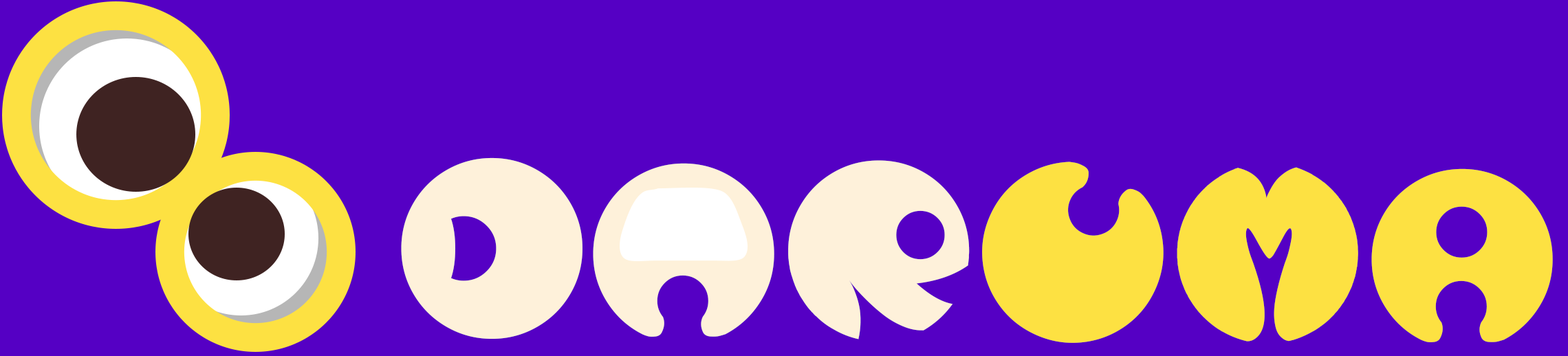
<style>
.page{position:relative;width:1568px;height:356px;background:#5500c4}
.page>*{position:absolute;margin:0}
.t1{font:220.1px "LunaNueva";color:#fef1da}
.t2{font:220.1px "LunaNueva";color:#fde142}
.t3{font:220.1px "LunaNueva";letter-spacing:-0.1em;color:#fde142}
</style>
<div class="page">
<p class="t1" style="left:401px;top:157px;width:181px;height:182px">D</p>
<p class="t1" style="left:788px;top:160px;width:182px;height:180px">R</p>
<p class="t2" style="left:982px;top:162px;width:182px;height:181px;rotate:25deg">U</p>
<p class="t1" style="left:593px;top:163px;width:181px;height:174px">A</p>
<p class="t3" style="left:1177px;top:167px;width:376px;height:175px">MA</p>
</div>
